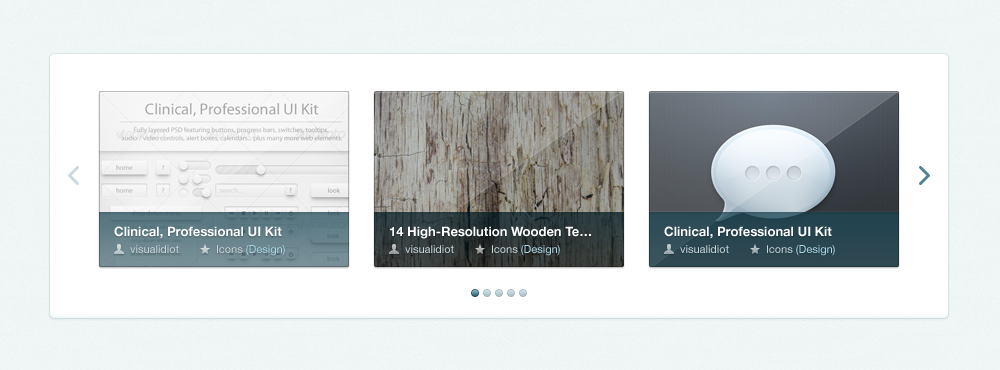
<style>
.page{position:relative;width:1000px;height:370px;background:#ffffff}
.page>*{position:absolute;margin:0}
.t1{font:13px "HelveticaNeue-Bold";color:#ffffff}
.t2{font:11px "HelveticaNeue";color:#c8d6db}
.t3{font:11px "HelveticaNeue";color:#aad9e8}
</style>
<div class="page">
<p class="t1" style="left:114px;top:226px;width:168px;height:13px">Clinical, Professional UI Kit</p>
<p class="t1" style="left:390px;top:226px;width:201px;height:13px">14 High-Resolution Wooden Te…</p>
<p class="t1" style="left:664px;top:226px;width:168px;height:13px">Clinical, Professional UI Kit</p>
<p class="t2" style="left:130px;top:245px;width:49px;height:8px">visualidiot</p>
<p class="t3" style="left:217px;top:245px;width:68px;height:11px"><span class="t2">Icons</span> (Design)</p>
<p class="t2" style="left:405px;top:245px;width:49px;height:8px">visualidiot</p>
<p class="t3" style="left:492px;top:245px;width:68px;height:11px"><span class="t2">Icons</span> (Design)</p>
<p class="t2" style="left:680px;top:245px;width:49px;height:8px">visualidiot</p>
<p class="t3" style="left:767px;top:245px;width:68px;height:11px"><span class="t2">Icons</span> (Design)</p>
</div>
